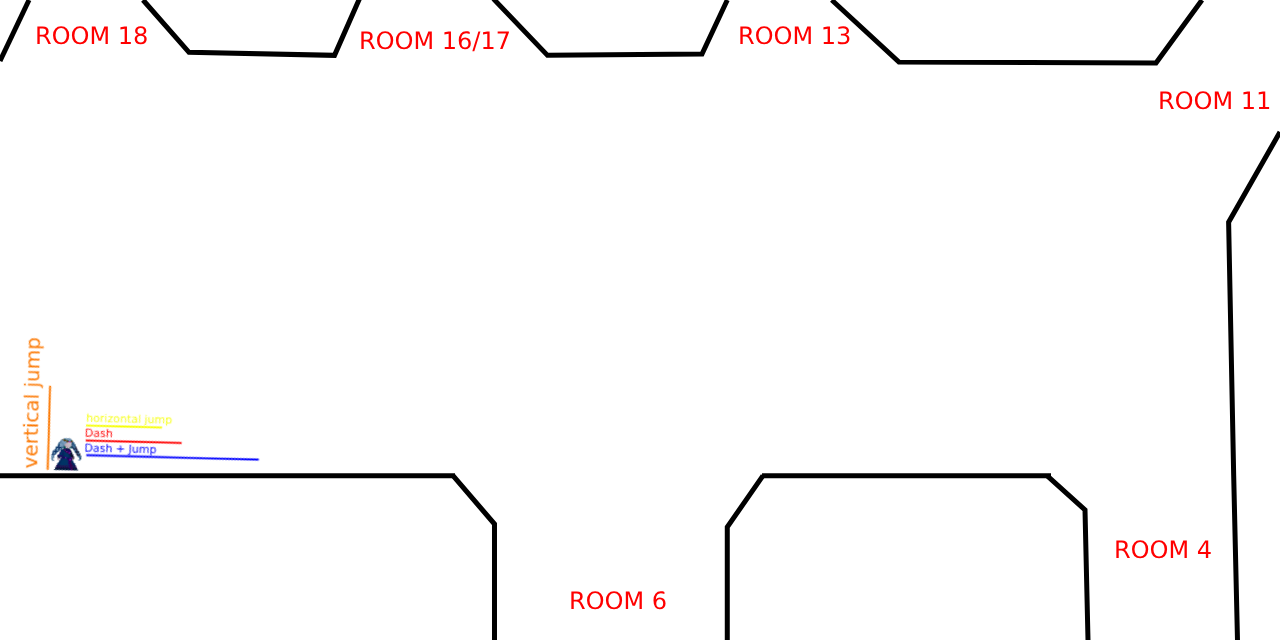
<style>
.page{position:relative;width:1280px;height:640px;background:#ffffff}
.page>*{position:absolute;margin:0}
.t1{font:24px "DejaVuSans";color:#ff0000}
</style>
<div class="page">
<p class="t1" style="left:37px;top:26px;width:110px;height:19px">ROOM 18</p>
<p class="t1" style="left:740px;top:26px;width:110px;height:19px">ROOM 13</p>
<p class="t1" style="left:361px;top:31px;width:148px;height:21px">ROOM 16/17</p>
<p class="t1" style="left:1160px;top:91px;width:110px;height:19px">ROOM 11</p>
<p class="t1" style="left:1116px;top:540px;width:95px;height:19px">ROOM 4</p>
<p class="t1" style="left:571px;top:591px;width:95px;height:19px">ROOM 6</p>
</div>
